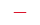
<style>
.page{position:relative;width:40px;height:25px;background:#ffffff}
.page>*{position:absolute;margin:0}
.t1{font:24px "TimesNewRomanPSMT";color:#db152c}
</style>
<div class="page">
<p class="t1" style="left:13px;top:12px;width:14px;height:1px">_</p>
</div>
